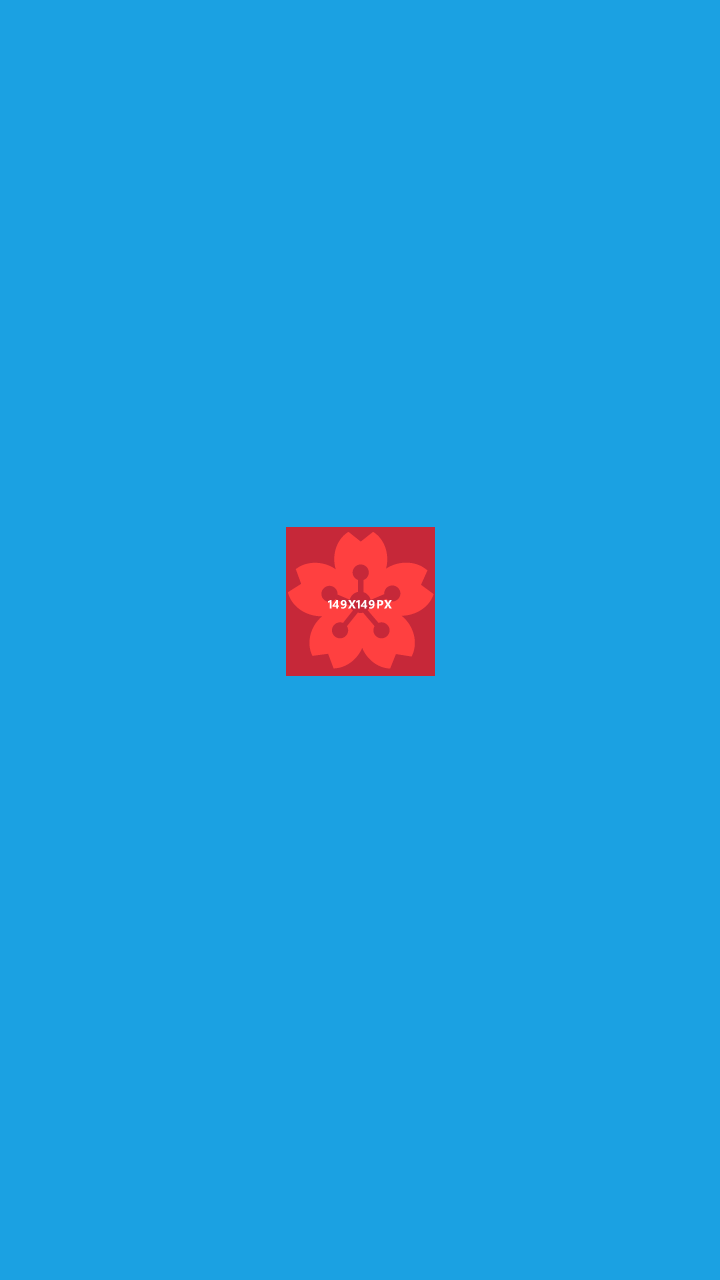
<style>
.page{position:relative;width:720px;height:1280px;background:#1ba1e2}
.page>*{position:absolute;margin:0}
.t1{font:12px "SegoeWP-Bold";letter-spacing:0.025em;color:#ffffff;text-transform:uppercase}
</style>
<div class="page">
<p class="t1" style="left:328px;top:600px;width:64px;height:9px">149x149px</p>
</div>
